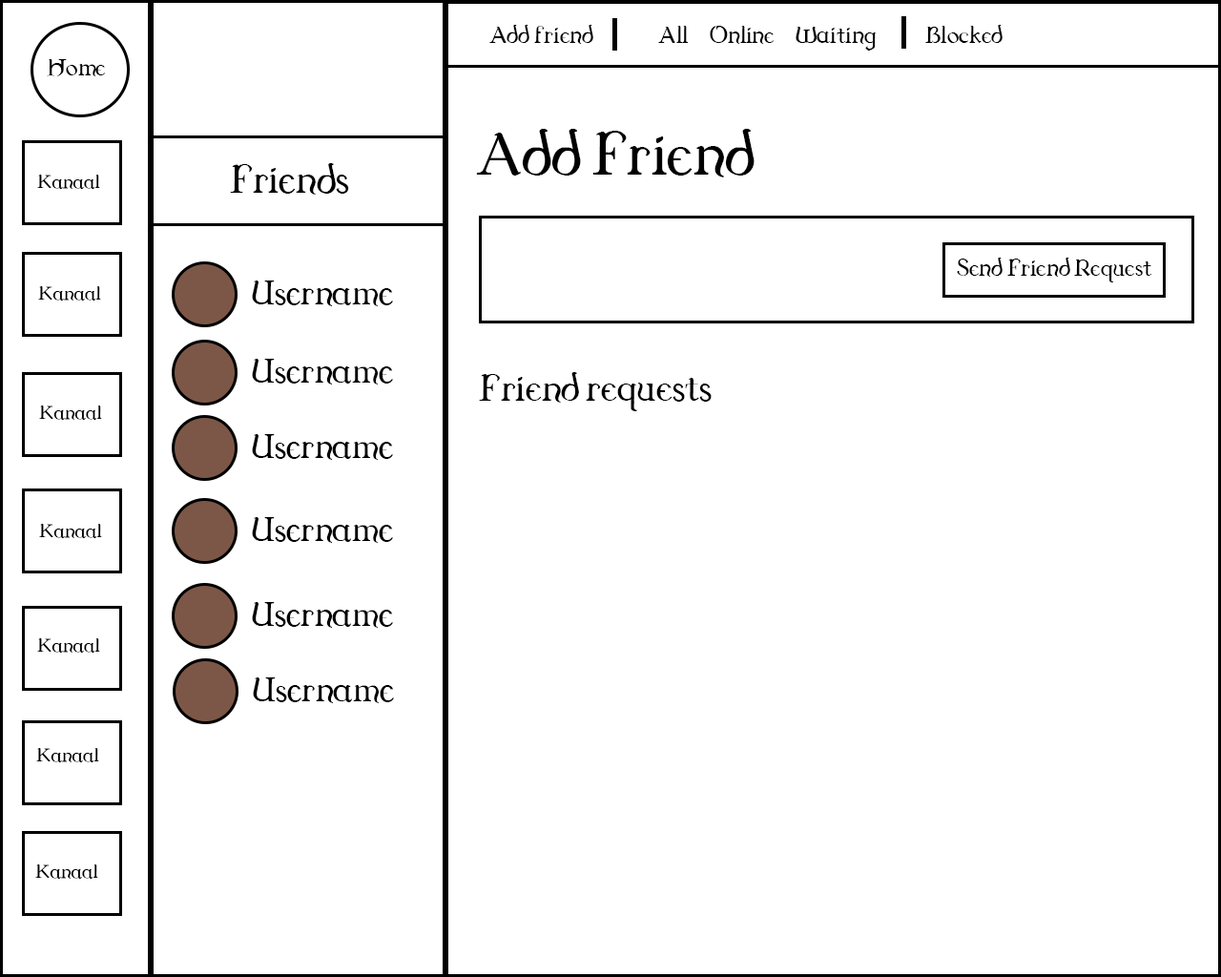
<style>
.page{position:relative;width:1221px;height:977px;background:#ffffff}
.page>*{position:absolute;margin:0}
.t1{font:34.3px "Dungeon";color:#000000}
.t2{font:88.6px "Dungeon";color:#000000}
.t3{font:58.3px "Dungeon";color:#000000}
.t4{font:28px "Dungeon";color:#000000}
.t5{font:50.5px "Dungeon";color:#000000}
.t6{font:55px "Dungeon";color:#000000}
</style>
<div class="page">
<p class="t1" style="left:489px;top:25px;width:104px;height:19px">Add friend</p>
<p class="t1" style="left:658px;top:26px;width:31px;height:17px">All</p>
<p class="t1" style="left:710px;top:26px;width:64px;height:18px">Online</p>
<p class="t1" style="left:795px;top:27px;width:82px;height:24px">Waiting</p>
<p class="t1" style="left:925px;top:25px;width:77px;height:18px">Blocked</p>
<p class="t1" style="left:47px;top:59px;width:59px;height:17px">Home</p>
<p class="t2" style="left:476px;top:129px;width:278px;height:48px">Add Friend</p>
<p class="t3" style="left:230px;top:163px;width:119px;height:32px">Friends</p>
<p class="t4" style="left:37px;top:175px;width:63px;height:14px">Kanaal</p>
<p class="t1" style="left:957px;top:258px;width:195px;height:24px">Send Friend Request</p>
<p class="t5" style="left:252px;top:280px;width:141px;height:26px">Username</p>
<p class="t4" style="left:38px;top:286px;width:63px;height:14px">Kanaal</p>
<p class="t5" style="left:252px;top:359px;width:141px;height:25px">Username</p>
<p class="t6" style="left:479px;top:372px;width:233px;height:39px">Friend requests</p>
<p class="t4" style="left:39px;top:405px;width:63px;height:15px">Kanaal</p>
<p class="t5" style="left:252px;top:434px;width:141px;height:26px">Username</p>
<p class="t5" style="left:252px;top:517px;width:141px;height:26px">Username</p>
<p class="t4" style="left:39px;top:524px;width:63px;height:14px">Kanaal</p>
<p class="t5" style="left:252px;top:602px;width:141px;height:26px">Username</p>
<p class="t4" style="left:37px;top:638px;width:63px;height:14px">Kanaal</p>
<p class="t5" style="left:253px;top:677px;width:141px;height:26px">Username</p>
<p class="t4" style="left:36px;top:748px;width:63px;height:14px">Kanaal</p>
<p class="t4" style="left:35px;top:864px;width:63px;height:14px">Kanaal</p>
</div>
